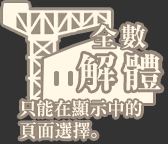
<style>
.page{position:relative;width:168px;height:144px;background:#333333}
.page>*{position:absolute;margin:0}
.t1{font:26px "RyuminPro-ExBold";letter-spacing:0.15em;color:#fff8e6}
.t2{font:40px "RyuminPro-ExBold";letter-spacing:0.15em;color:#fff8e6}
.t3{font:18px/22px "RyuminPro-ExBold";color:#fff8e6}
</style>
<div class="page">
<p class="t1" style="left:92px;top:24px;width:54px;height:25px">全數</p>
<p class="t2" style="left:78px;top:53px;width:83px;height:38px">解體</p>
<p class="t3" style="left:19px;top:100px;width:123px;height:39px">只能在顯示中的<br>頁面選擇。</p>
</div>
